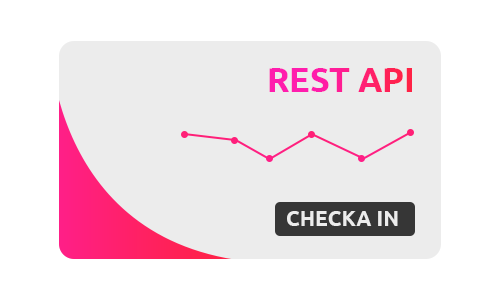
<style>
.page{position:relative;width:500px;height:300px;background:#ffffff}
.page>*{position:absolute;margin:0}
.t1{font:33.7px "Ubuntu-Bold"}
.t2{font:21px "Ubuntu-Bold";color:#ececec}
</style>
<div class="page">
<p class="t1" style="left:269px;top:68px;width:143px;height:24px">REST API</p>
<p class="t2" style="left:287px;top:211px;width:111px;height:15px">CHECKA IN</p>
</div>
